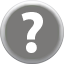
<style>
.page{position:relative;width:64px;height:64px;background:#7a7978}
.page>*{position:absolute;margin:0}
.t1{font:60px "MyriadPro-Bold";color:#ffffff}
</style>
<div class="page">
<p class="t1" style="left:21px;top:12px;width:22px;height:41px">?</p>
</div>
